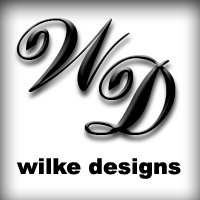
<style>
.page{position:relative;width:200px;height:200px;background:#ffffff}
.page>*{position:absolute;margin:0}
.t1{font:97px "LokiCola";color:#000000}
.t2{font:102px "LokiCola";color:#000000}
.t3{font:22px "Arial-Black";color:#000000}
</style>
<div class="page">
<p class="t1" style="left:16px;top:18px;width:114px;height:74px">W</p>
<p class="t2" style="left:84px;top:55px;width:92px;height:80px">D</p>
<p class="t3" style="left:17px;top:158px;width:164px;height:21px">wilke designs</p>
</div>
